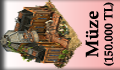
<style>
.page{position:relative;width:120px;height:70px}
.page>*{position:absolute;margin:0}
.t1{font:12px "PalatinoLinotype-Bold";color:#010101}
.t2{font:18px "PalatinoLinotype-Bold";color:#010101}
</style>
<div class="page">
<p class="t1" style="left:85px;top:2px;width:29px;height:64px;text-align:center;rotate:-90deg"><span class="t2">Müze<br></span>(150.000 TL)</p>
</div>
